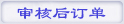
<style>
.page{position:relative;width:124px;height:24px}
.page>*{position:absolute;margin:0}
.t1{font:18px "LiSu";color:#4744da}
</style>
<div class="page">
<p class="t1" style="left:17px;top:7px;width:89px;height:12px">审核后订单</p>
</div>
